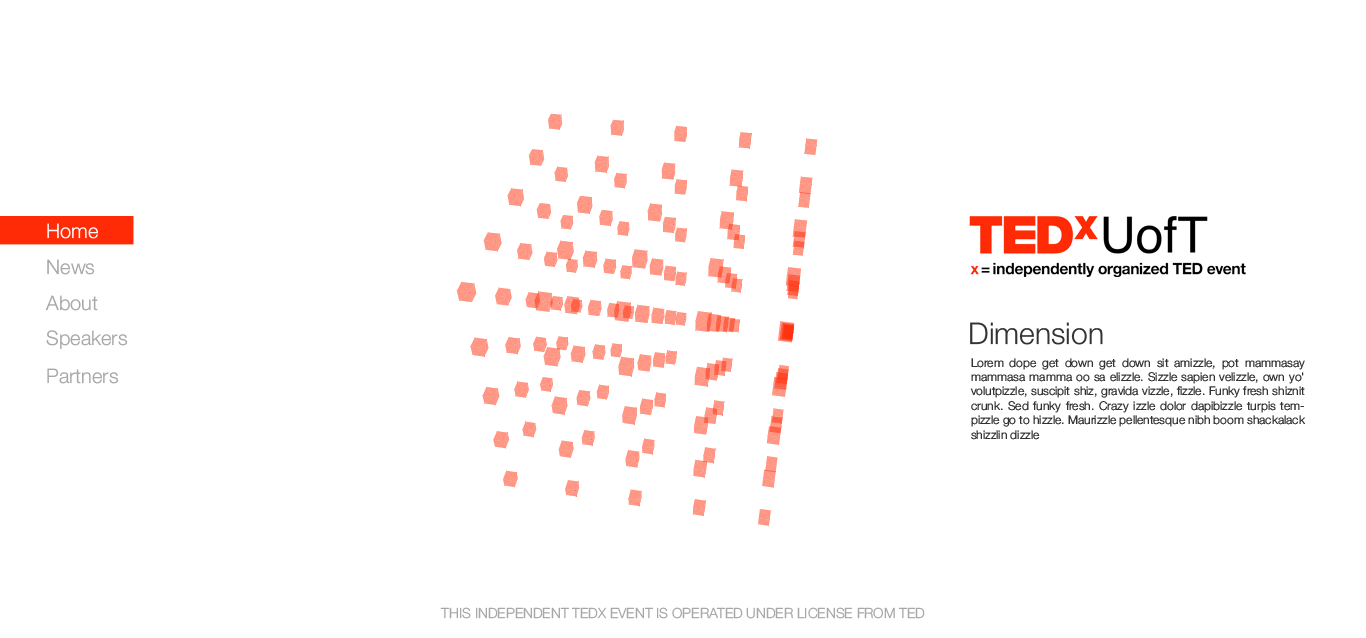
<style>
.page{position:relative;width:1366px;height:638px;background:#ffffff}
.page>*{position:absolute;margin:0}
.t1{font:20px "HelveticaNeue-Light";color:#fefefe}
.t2{font:20px "HelveticaNeue-Light";color:#a8a8a8}
.t3{font:30px "HelveticaNeue-Light";color:#333333}
.t4{font:12px "HelveticaNeue-Light";color:#333333}
.t5{font:14px "HelveticaNeue-Light";color:#a8a8a8}
</style>
<div class="page">
<p class="t1" style="left:47px;top:223px;width:51px;height:16px">Home</p>
<p class="t2" style="left:47px;top:259px;width:48px;height:16px">News</p>
<p class="t2" style="left:45px;top:295px;width:53px;height:16px">About</p>
<p class="t3" style="left:970px;top:322px;width:133px;height:23px">Dimension</p>
<p class="t2" style="left:46px;top:330px;width:82px;height:19px">Speakers</p>
<p class="t4" style="left:970px;top:358px;width:336px;height:82px;text-align:justify">Lorem dope get down get down sit amizzle, pot mammasay mammasa mamma oo sa elizzle. Sizzle sapien velizzle, own yo' volutpizzle, suscipit shiz, gravida vizzle, fizzle. Funky fresh shiznit crunk. Sed funky fresh. Crazy izzle dolor dapibizzle turpis tempizzle go to hizzle. Maurizzle pellentesque nibh boom shackalack shizzlin dizzle</p>
<p class="t2" style="left:47px;top:368px;width:72px;height:16px">Partners</p>
<p class="t5" style="left:440px;top:607px;width:485px;height:12px">THIS INDEPENDENT TEDX EVENT IS OPERATED UNDER LICENSE FROM TED</p>
</div>
